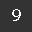
<style>
.page{position:relative;width:32px;height:32px;background:#333333}
.page>*{position:absolute;margin:0}
.t1{font:17.8px "MyriadPro-Regular";color:#ffffff;scale:1.12 1}
</style>
<div class="page">
<p class="t1" style="left:12px;top:9px;width:9px;height:12px">9</p>
</div>
